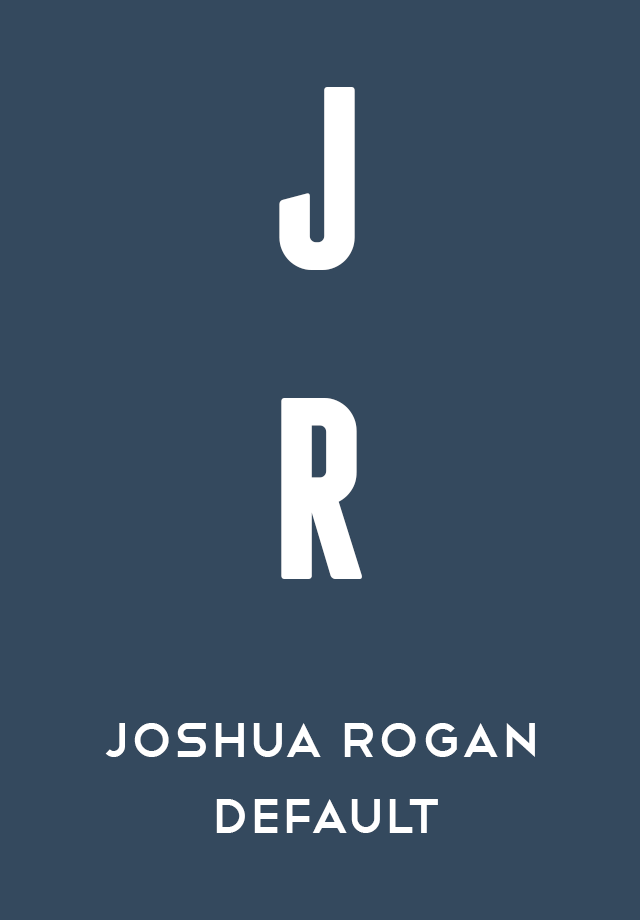
<style>
.page{position:relative;width:640px;height:920px;background:#34495e}
.page>*{position:absolute;margin:0}
.t1{font:259px "Franchise-Bold";color:#ffffff}
.t2{font:63px "Telegrafico";color:#ffffff}
</style>
<div class="page">
<p class="t1" style="left:279px;top:87px;width:83px;height:492px;text-align:center">J<br>R</p>
<p class="t2" style="left:105px;top:723px;width:430px;height:110px;text-align:center">Joshua Rogan <br>Default</p>
</div>
